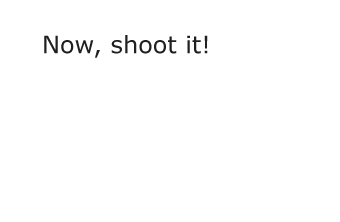
<style>
.page{position:relative;width:340px;height:222px;background:#ffffff}
.page>*{position:absolute;margin:0}
.t1{font:24px "Verdana";color:#202020}
</style>
<div class="page">
<p class="t1" style="left:44px;top:35px;width:164px;height:23px">Now, shoot it!</p>
</div>
